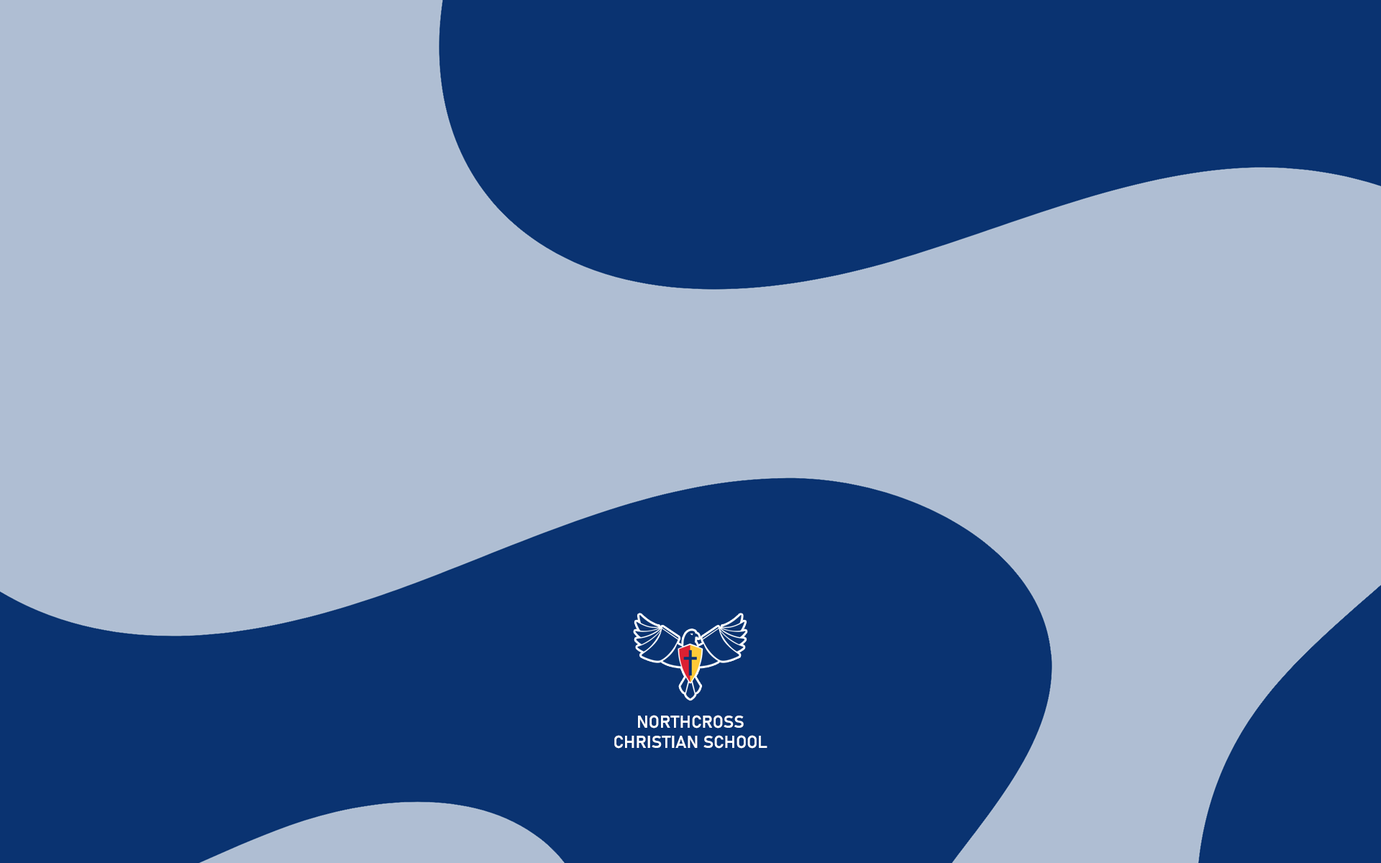
<style>
.page{position:relative;width:1381px;height:863px;background:#afbed3}
.page>*{position:absolute;margin:0}
.t1{font:17.3px "Bahnschrift-SemiBold";color:#ffffff}
</style>
<div class="page">
<p class="t1" style="left:614px;top:715px;width:154px;height:34px;text-align:center">NORTHCROSS<br>CHRISTIAN SCHOOL</p>
</div>
